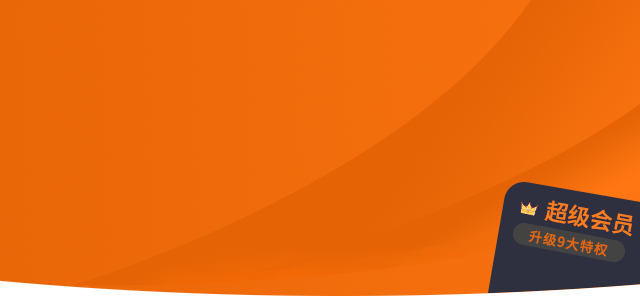
<style>
.page{position:relative;width:640px;height:300px}
.page>*{position:absolute;margin:0}
.t1{font:22.8px "SourceHanSansCN-Medium";color:#ff7d1f}
.t2{font:13.6px "SourceHanSansCN-Medium";letter-spacing:0.075em;color:#e2670e}
</style>
<div class="page">
<p class="t1" style="left:544px;top:200px;width:89px;height:37px;rotate:10deg">超级会员</p>
<p class="t2" style="left:528px;top:230px;width:80px;height:27px;rotate:11deg">升级9大特权</p>
</div>
